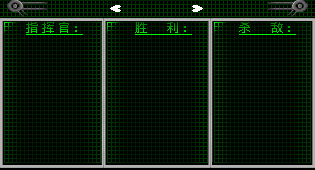
<style>
.page{position:relative;width:315px;height:170px;background:#000000}
.page>*{position:absolute;margin:0}
.t1{font:12px "MicrosoftYaHei";text-decoration:underline}
</style>
<div class="page">
<p class="t1" style="left:26px;top:22px;width:57px;height:13px">指 挥 官：</p>
<p class="t1" style="left:135px;top:22px;width:57px;height:13px">胜     利：</p>
<p class="t1" style="left:239px;top:22px;width:57px;height:13px">杀     敌：</p>
</div>
